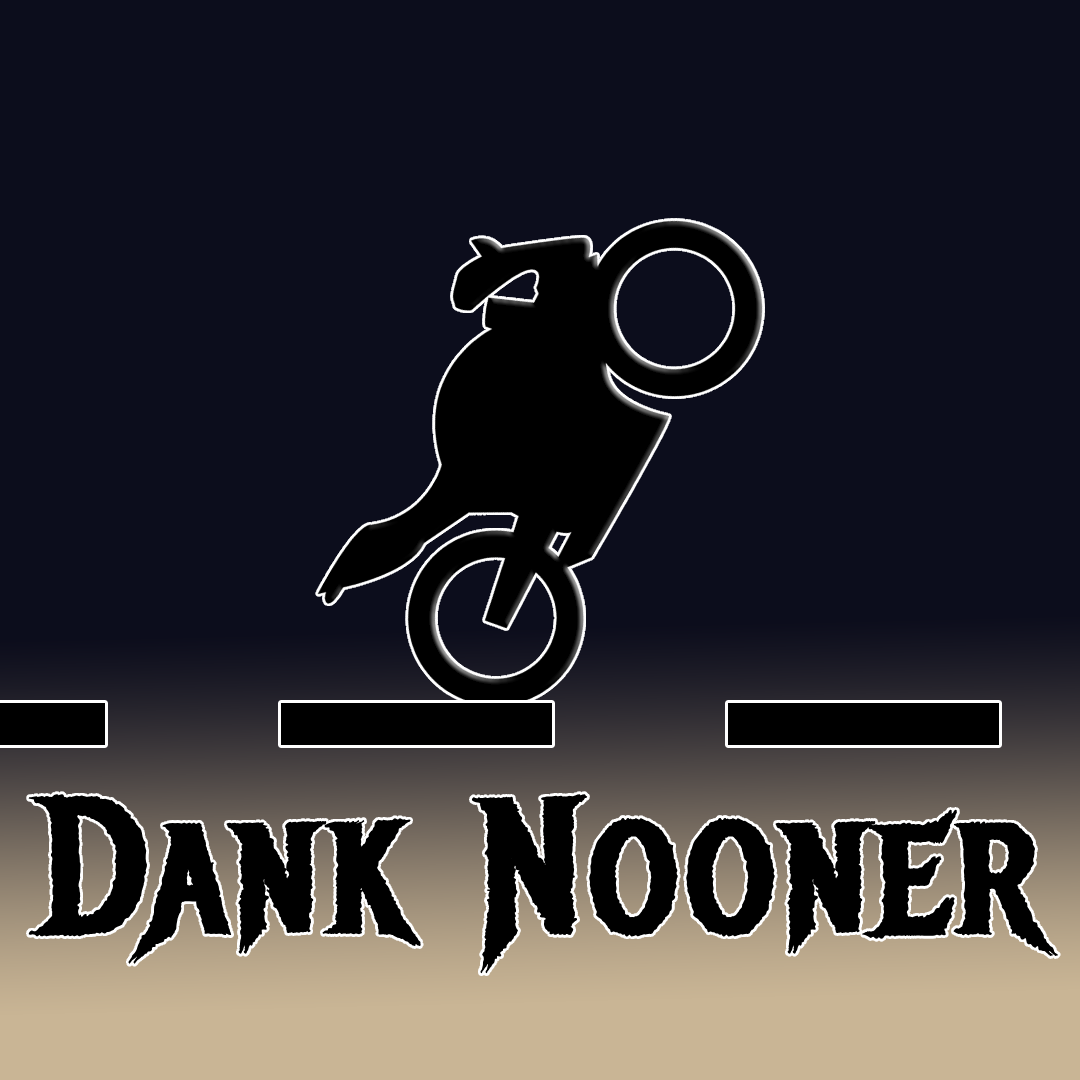
<style>
.page{position:relative;width:1080px;height:1080px;background:#0c0d1c}
.page>*{position:absolute;margin:0}
.t1{font:192px "MetalMania-Regular";color:#000000;font-weight:bold}
</style>
<div class="page">
<p class="t1" style="left:28px;top:794px;width:1031px;height:180px">Dank Nooner</p>
</div>
